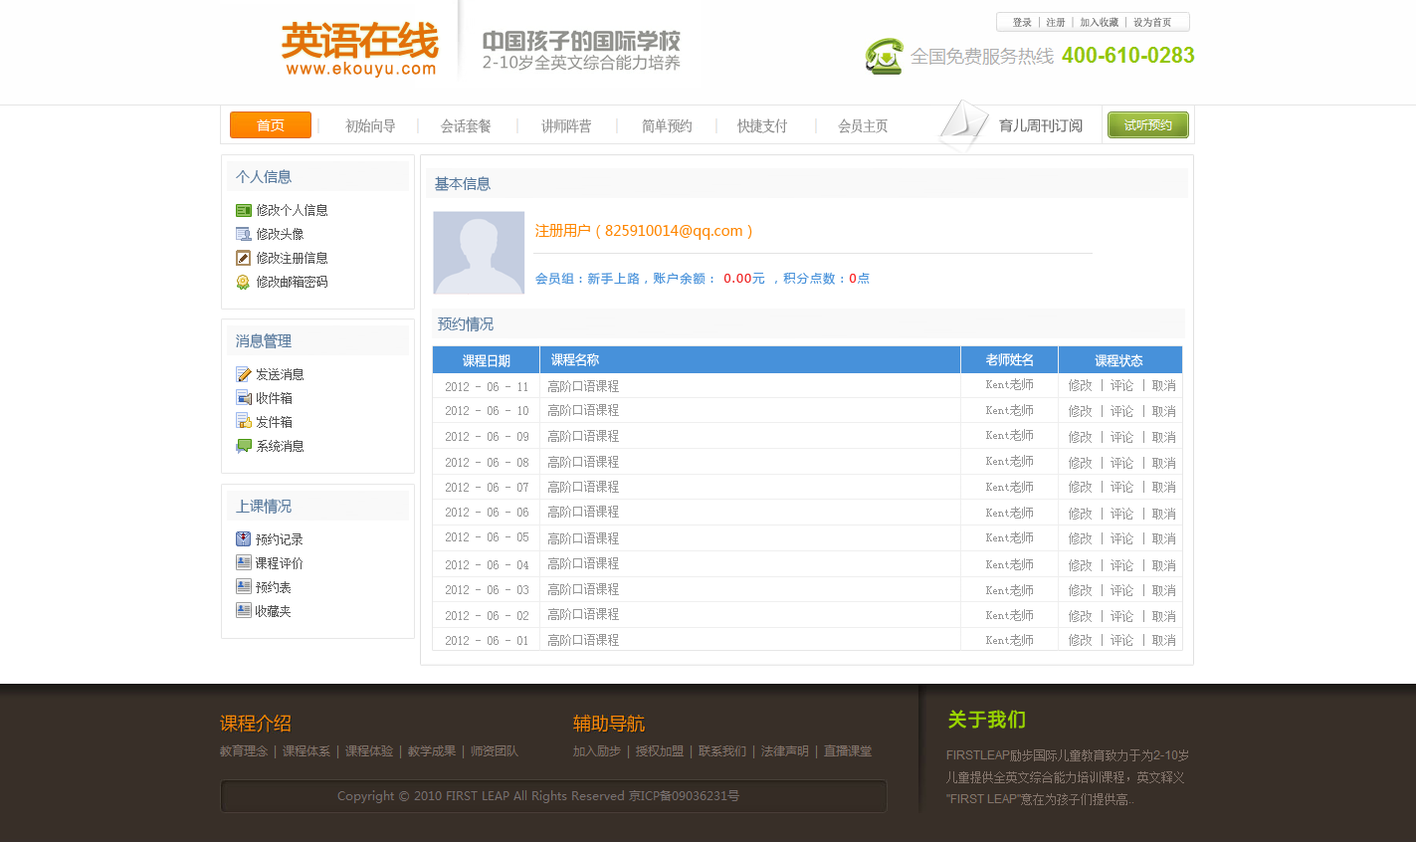
<style>
.page{position:relative;width:1416px;height:842px;background:#ffffff}
.page>*{position:absolute;margin:0}
.t1{font:10.2px "NSimSun";color:#6c6c6c;scale:0.95 1}
.t2{font:36.3px "MicrosoftYaHei";letter-spacing:-0.068em;color:#e27109;font-weight:bold;scale:1.11 1}
.t3{font:17.1px "ArialMT";letter-spacing:0.1em;color:#e27109;scale:0.96 1}
.t4{font:15.2px "NSimSun";letter-spacing:-0.086em;color:#868686;scale:0.9 1}
.t5{font:15.2px "MicrosoftYaHei";color:#56789c;scale:0.92 1}
.t6{font:11.9px/23.9px "NSimSun";color:#535353}
.t7{font:15.2px "MicrosoftYaHei";color:#fe8600;scale:0.92 1}
.t8{font:11.9px "MicrosoftYaHei";letter-spacing:0.1em;color:#4791da}
.t9{font:11.9px "MicrosoftYaHei";letter-spacing:0.1em;color:#ef2828}
.t10{font:11.9px "MicrosoftYaHei";letter-spacing:0.1em;color:#fb2323}
.t11{font:13px "MicrosoftYaHei";color:#ffffff;scale:0.92 1}
.t12{font:13px "NSimSun";color:#989898;scale:0.92 1}
.t13{font:11.9px "NSimSun";color:#989898}
.t14{font:18.3px "MicrosoftYaHei";letter-spacing:0.1em;color:#99d400;font-weight:bold;scale:0.96 1}
</style>
<div class="page">
<p class="t1" style="left:1013px;top:17px;width:158px;height:11px">登录 | 注册 | 加入收藏 | 设为首页</p>
<p class="t2" style="left:282px;top:21px;width:157px;height:38px">英语在线</p>
<p class="t3" style="left:286px;top:62px;width:150px;height:16px">www.ekouyu.com</p>
<p class="t4" style="left:345px;top:118px;width:543px;height:15px">初始向导        会话套餐         讲师阵营         简单预约        快捷支付         会员主页</p>
<p class="t5" style="left:236px;top:169px;width:56px;height:15px">个人信息</p>
<p class="t5" style="left:435px;top:176px;width:56px;height:15px">基本信息</p>
<p class="t6" style="left:257px;top:204px;width:70px;height:84px">修改个人信息<br>修改头像<br>修改注册信息<br>修改邮箱密码</p>
<p class="t7" style="left:535px;top:224px;width:217px;height:16px">注册用户（825910014@qq.com）</p>
<p class="t8" style="left:535px;top:272px;width:335px;height:13px">会员组：新手上路，账户余额： <span class="t9">0.00</span>元 ，积分点数：<span class="t10">0</span>点</p>
<p class="t5" style="left:438px;top:316px;width:56px;height:16px">预约情况</p>
<p class="t5" style="left:236px;top:333px;width:56px;height:16px">消息管理</p>
<p class="t11" style="left:551px;top:353px;width:48px;height:13px">课程名称</p>
<p class="t11" style="left:986px;top:353px;width:47px;height:13px">老师姓名</p>
<p class="t11" style="left:463px;top:354px;width:48px;height:13px">课程日期</p>
<p class="t11" style="left:1095px;top:354px;width:49px;height:13px">课程状态</p>
<p class="t6" style="left:257px;top:368px;width:47px;height:84px">发送消息<br>收件箱<br>发件箱<br>系统消息</p>
<p class="t12" style="left:446px;top:382px;width:81px;height:9px">2012 - 06 - 11</p>
<p class="t13" style="left:548px;top:380px;width:71px;height:12px">高阶口语课程</p>
<p class="t13" style="left:986px;top:378px;width:47px;height:12px">Kent老师</p>
<p class="t13" style="left:1069px;top:379px;width:106px;height:12px">修改 | 评论 | 取消</p>
<p class="t12" style="left:446px;top:406px;width:82px;height:9px">2012 - 06 - 10</p>
<p class="t13" style="left:548px;top:404px;width:71px;height:12px">高阶口语课程</p>
<p class="t13" style="left:986px;top:404px;width:47px;height:12px">Kent老师</p>
<p class="t13" style="left:1069px;top:405px;width:106px;height:12px">修改 | 评论 | 取消</p>
<p class="t12" style="left:446px;top:432px;width:82px;height:9px">2012 - 06 - 09</p>
<p class="t13" style="left:548px;top:430px;width:71px;height:12px">高阶口语课程</p>
<p class="t13" style="left:986px;top:429px;width:47px;height:12px">Kent老师</p>
<p class="t13" style="left:1069px;top:431px;width:106px;height:12px">修改 | 评论 | 取消</p>
<p class="t12" style="left:446px;top:458px;width:82px;height:9px">2012 - 06 - 08</p>
<p class="t13" style="left:548px;top:456px;width:71px;height:12px">高阶口语课程</p>
<p class="t13" style="left:986px;top:455px;width:47px;height:12px">Kent老师</p>
<p class="t13" style="left:1069px;top:457px;width:106px;height:12px">修改 | 评论 | 取消</p>
<p class="t12" style="left:446px;top:483px;width:82px;height:9px">2012 - 06 - 07</p>
<p class="t13" style="left:548px;top:481px;width:71px;height:12px">高阶口语课程</p>
<p class="t13" style="left:986px;top:481px;width:47px;height:12px">Kent老师</p>
<p class="t13" style="left:1069px;top:481px;width:106px;height:12px">修改 | 评论 | 取消</p>
<p class="t5" style="left:236px;top:499px;width:56px;height:16px">上课情况</p>
<p class="t12" style="left:446px;top:508px;width:82px;height:9px">2012 - 06 - 06</p>
<p class="t13" style="left:548px;top:506px;width:71px;height:12px">高阶口语课程</p>
<p class="t13" style="left:986px;top:507px;width:47px;height:12px">Kent老师</p>
<p class="t13" style="left:1069px;top:508px;width:106px;height:12px">修改 | 评论 | 取消</p>
<p class="t6" style="left:256px;top:533px;width:47px;height:84px">预约记录<br>课程评价<br>预约表<br>收藏夹</p>
<p class="t12" style="left:446px;top:532px;width:82px;height:9px">2012 - 06 - 05</p>
<p class="t13" style="left:548px;top:532px;width:71px;height:12px">高阶口语课程</p>
<p class="t13" style="left:986px;top:531px;width:47px;height:12px">Kent老师</p>
<p class="t13" style="left:1069px;top:532px;width:106px;height:12px">修改 | 评论 | 取消</p>
<p class="t13" style="left:548px;top:557px;width:71px;height:12px">高阶口语课程</p>
<p class="t12" style="left:446px;top:560px;width:82px;height:9px">2012 - 06 - 04</p>
<p class="t13" style="left:986px;top:558px;width:47px;height:12px">Kent老师</p>
<p class="t13" style="left:1069px;top:559px;width:106px;height:12px">修改 | 评论 | 取消</p>
<p class="t12" style="left:446px;top:585px;width:82px;height:9px">2012 - 06 - 03</p>
<p class="t13" style="left:548px;top:583px;width:71px;height:12px">高阶口语课程</p>
<p class="t13" style="left:986px;top:584px;width:47px;height:12px">Kent老师</p>
<p class="t13" style="left:1069px;top:584px;width:106px;height:12px">修改 | 评论 | 取消</p>
<p class="t12" style="left:446px;top:611px;width:82px;height:9px">2012 - 06 - 02</p>
<p class="t13" style="left:548px;top:608px;width:71px;height:12px">高阶口语课程</p>
<p class="t13" style="left:986px;top:609px;width:47px;height:12px">Kent老师</p>
<p class="t13" style="left:1069px;top:610px;width:106px;height:12px">修改 | 评论 | 取消</p>
<p class="t12" style="left:446px;top:636px;width:81px;height:9px">2012 - 06 - 01</p>
<p class="t13" style="left:548px;top:634px;width:71px;height:12px">高阶口语课程</p>
<p class="t13" style="left:986px;top:634px;width:47px;height:12px">Kent老师</p>
<p class="t13" style="left:1069px;top:634px;width:106px;height:12px">修改 | 评论 | 取消</p>
<p class="t14" style="left:948px;top:710px;width:77px;height:19px">关于我们</p>
</div>
